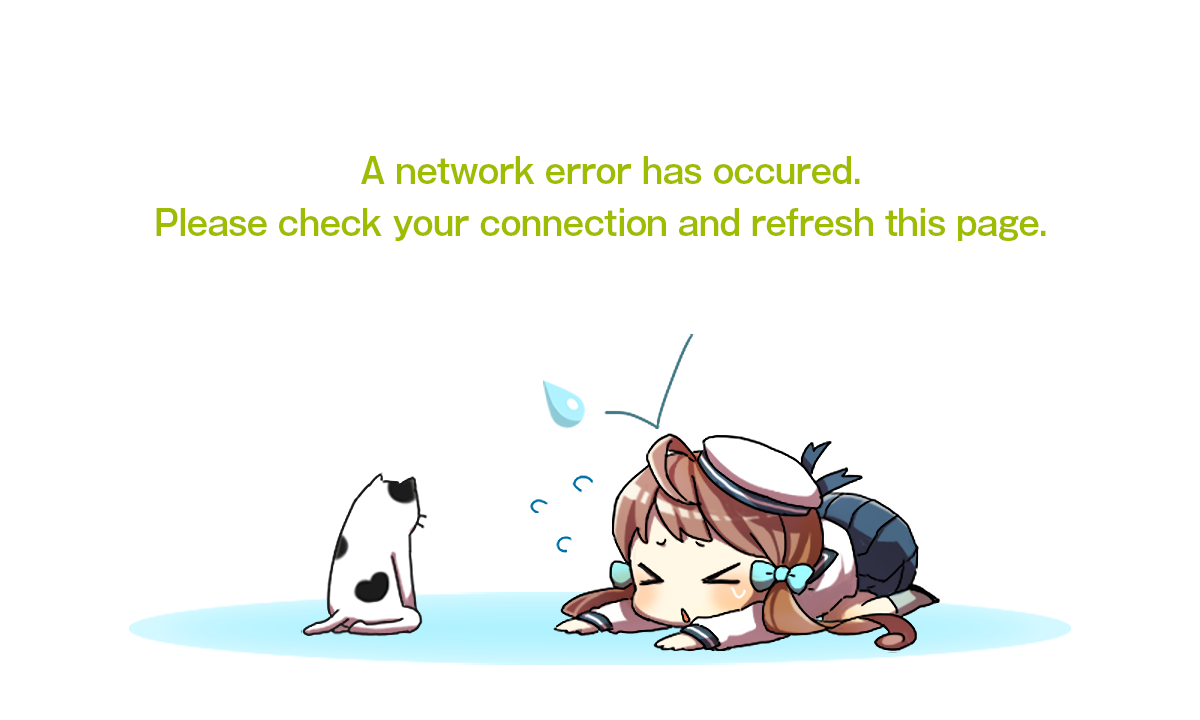
<style>
.page{position:relative;width:1200px;height:720px;background:#ffffff}
.page>*{position:absolute;margin:0}
.t1{font:34px/52px "GothicMB101Pro-DeBold";color:#9fbc00;scale:0.9 1}
</style>
<div class="page">
<p class="t1" style="left:156px;top:156px;width:890px;height:85px;text-align:center">A network error has occured.<br>Please check your connection and refresh this page.</p>
</div>
